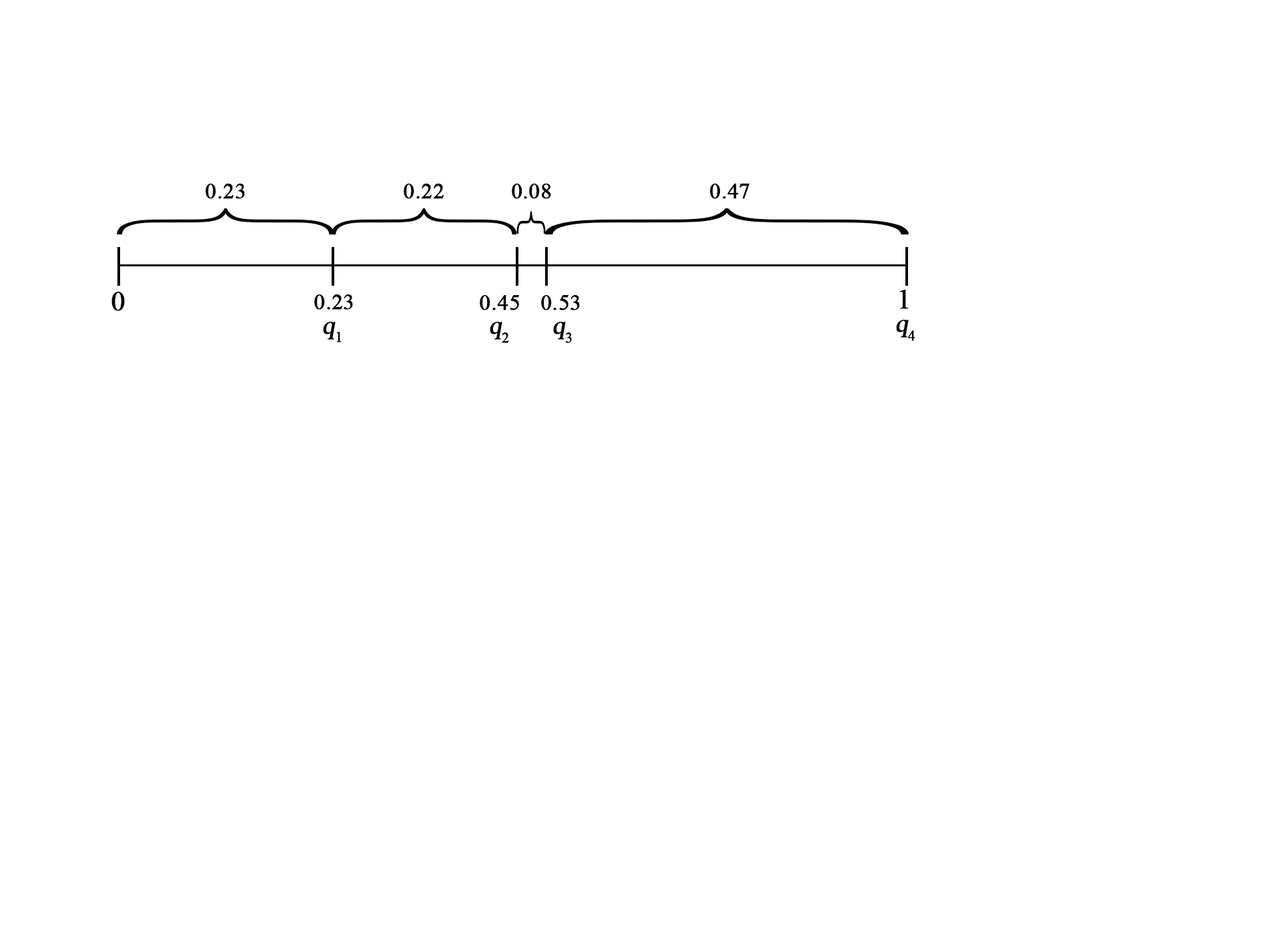
<style>
.page{position:relative;width:1261px;height:946px;background:#ffffff}
.page>*{position:absolute;margin:0}
.t1{font:22.2px "TimesNewRomanPSMT";color:#000000;font-weight:bold}
.t2{font:218px "Didot";color:#000000;font-weight:bold;scale:0.38 1}
.t3{font:185.9px "Didot";color:#000000;font-weight:bold;scale:0.44 1}
.t4{font:365.8px "Didot";color:#000000;font-weight:bold;scale:0.22 1}
.t5{font:27.9px "Didot";color:#000000;font-weight:bold;scale:2.5 1}
.t6{font:27.8px "TimesNewRomanPSMT";color:#000000;font-weight:bold}
.t7{font:25px "TimesNewRomanPSMT";color:#000000;font-weight:bold;font-style:italic}
.t8{font:25px "TimesNewRomanPSMT";color:#000000;font-weight:bold}
</style>
<div class="page">
<p class="t1" style="left:206px;top:183px;width:39px;height:16px">0.23</p>
<p class="t1" style="left:404px;top:183px;width:40px;height:16px">0.22</p>
<p class="t1" style="left:512px;top:183px;width:39px;height:16px">0.08</p>
<p class="t1" style="left:710px;top:183px;width:39px;height:16px">0.47</p>
<p class="t2" style="left:117px;top:208px;width:218px;height:27px;rotate:90deg">{</p>
<p class="t3" style="left:331px;top:208px;width:186px;height:27px;rotate:90deg">{</p>
<p class="t4" style="left:544px;top:208px;width:365px;height:27px;rotate:90deg">{</p>
<p class="t5" style="left:516px;top:211px;width:30px;height:23px;rotate:90deg">{</p>
<p class="t6" style="left:111px;top:292px;width:14px;height:19px">0</p>
<p class="t6" style="left:900px;top:290px;width:8px;height:19px">1</p>
<p class="t1" style="left:314px;top:294px;width:39px;height:16px">0.23</p>
<p class="t1" style="left:480px;top:295px;width:40px;height:15px">0.45</p>
<p class="t1" style="left:541px;top:295px;width:39px;height:15px">0.53</p>
<p class="t7" style="left:323px;top:322px;width:19px;height:20px">q<span class="t8">1</span></p>
<p class="t7" style="left:490px;top:322px;width:19px;height:21px">q<span class="t8">2</span></p>
<p class="t7" style="left:553px;top:322px;width:19px;height:21px">q<span class="t8">3</span></p>
<p class="t7" style="left:896px;top:320px;width:19px;height:21px">q<span class="t8">4</span></p>
</div>
